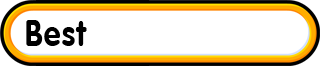
<style>
.page{position:relative;width:320px;height:66px;background:#ffffff}
.page>*{position:absolute;margin:0}
.t1{font:36px "VNI-Vari";letter-spacing:0.04em;color:#000000;scale:0.84 1}
</style>
<div class="page">
<p class="t1" style="left:26px;top:20px;width:61px;height:26px">Best</p>
</div>
